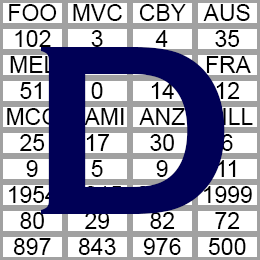
<style>
.page{position:relative;width:260px;height:260px;background:#ffffff}
.page>*{position:absolute;margin:0}
.t1{font:23px/26px "ArialMT";color:#000000}
.t2{font:23px/26px "ArialMT"}
.t3{font:250px "CopperplateGothic-Bold";color:#000056}
</style>
<div class="page">
<p class="t1" style="left:7px;top:4px;width:51px;height:251px;text-align:center">FOO<br>102<br>MEL<br>51<br>MCG<br>25<br>9<br>1954<br>80<br>897</p>
<p class="t2" style="left:69px;top:4px;width:55px;height:251px;text-align:center">MVC<br>3<br>SYD<br>0<br>AAMI<br>17<br>5<br>2015<br>29<br>843</p>
<p class="t1" style="left:137px;top:4px;width:50px;height:251px;text-align:center">CBY<br>4<br>MEL<br>14<br>ANZ<br>30<br>9<br>2012<br>82<br>976</p>
<p class="t1" style="left:203px;top:4px;width:50px;height:251px;text-align:center">AUS<br>35<br>FRA<br>12<br>MILL<br>6<br>11<br>1999<br>72<br>500</p>
<p class="t3" style="left:41px;top:47px;width:184px;height:167px">D</p>
</div>
